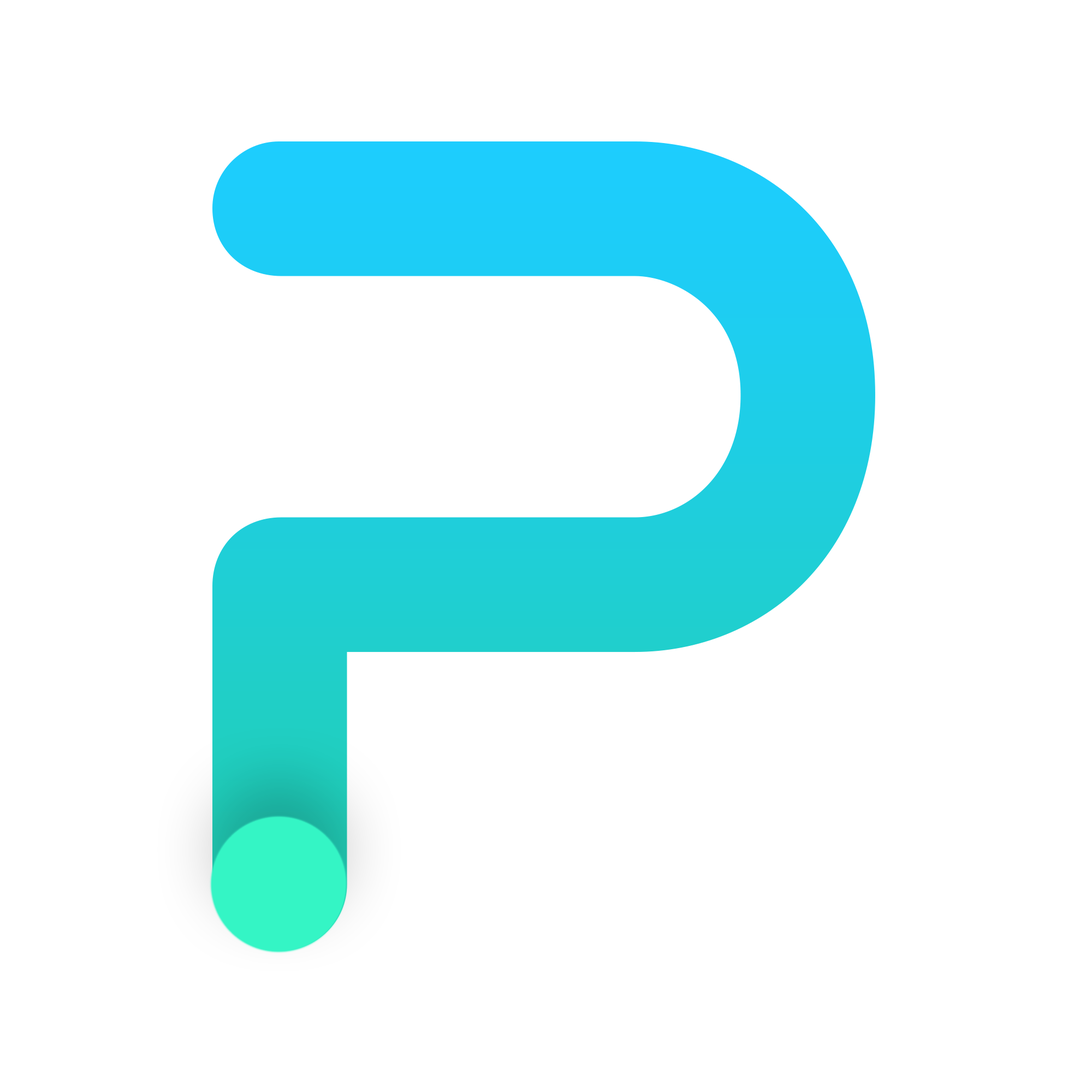
<style>
.page{position:relative;width:1092px;height:1092px;background:#ffffff}
.page>*{position:absolute;margin:0}
.t1{font:1112.5px "Patron-PersonalUse-Regular"}
</style>
<div class="page">
<p class="t1" style="left:212px;top:141px;width:663px;height:810px">P</p>
</div>
